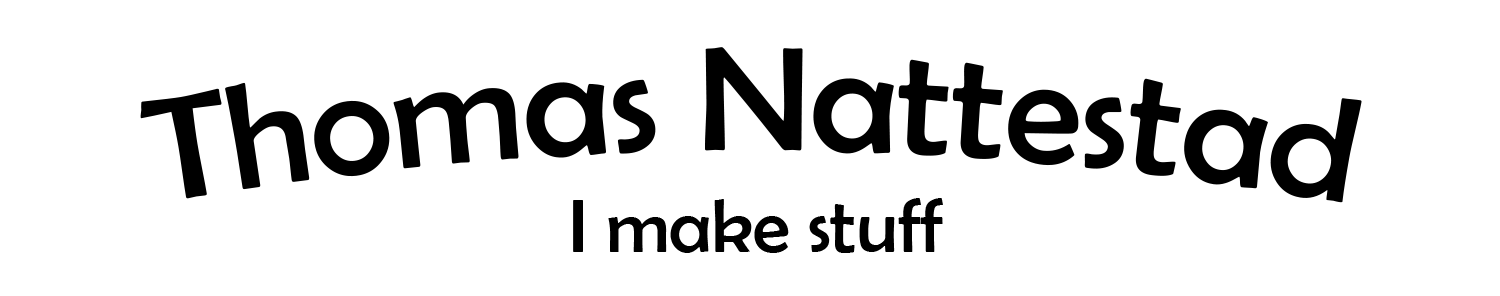
<style>
.page{position:relative;width:1500px;height:296px;background:#ffffff}
.page>*{position:absolute;margin:0}
.t1{font:149.5px "BerlinSansFB-Reg";color:#000000}
.t2{font:75.5px "BerlinSansFB-Reg";color:#000000}
</style>
<div class="page">
<p class="t1" style="left:140px;top:47px;width:1222px;height:156px">Thomas Nattestad</p>
<p class="t2" style="left:573px;top:198px;width:370px;height:55px">I make stuff</p>
</div>
